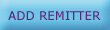
<style>
.page{position:relative;width:110px;height:30px}
.page>*{position:absolute;margin:0}
.t1{font:12px "Verdana";color:#651f76}
</style>
<div class="page">
<p class="t1" style="left:8px;top:11px;width:93px;height:9px">ADD REMITTER</p>
</div>
